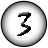
<style>
.page{position:relative;width:48px;height:48px;background:#ffffff}
.page>*{position:absolute;margin:0}
.t1{font:35px "Mistral"}
</style>
<div class="page">
<p class="t1" style="left:17px;top:12px;width:14px;height:24px">3</p>
</div>
